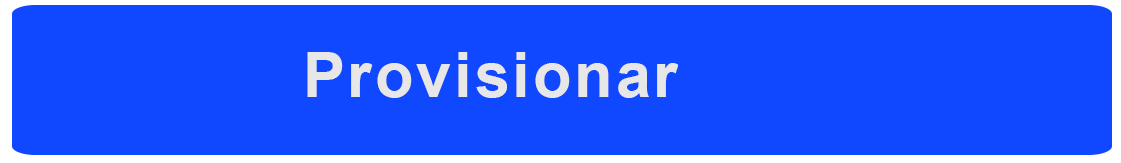
<style>
.page{position:relative;width:1121px;height:163px;background:#1048ff}
.page>*{position:absolute;margin:0}
.t1{font:62.5px "Arial-BoldMT";letter-spacing:0.05em;color:#e8e7e7}
</style>
<div class="page">
<p class="t1" style="left:307px;top:52px;width:372px;height:46px">Provisionar</p>
</div>
